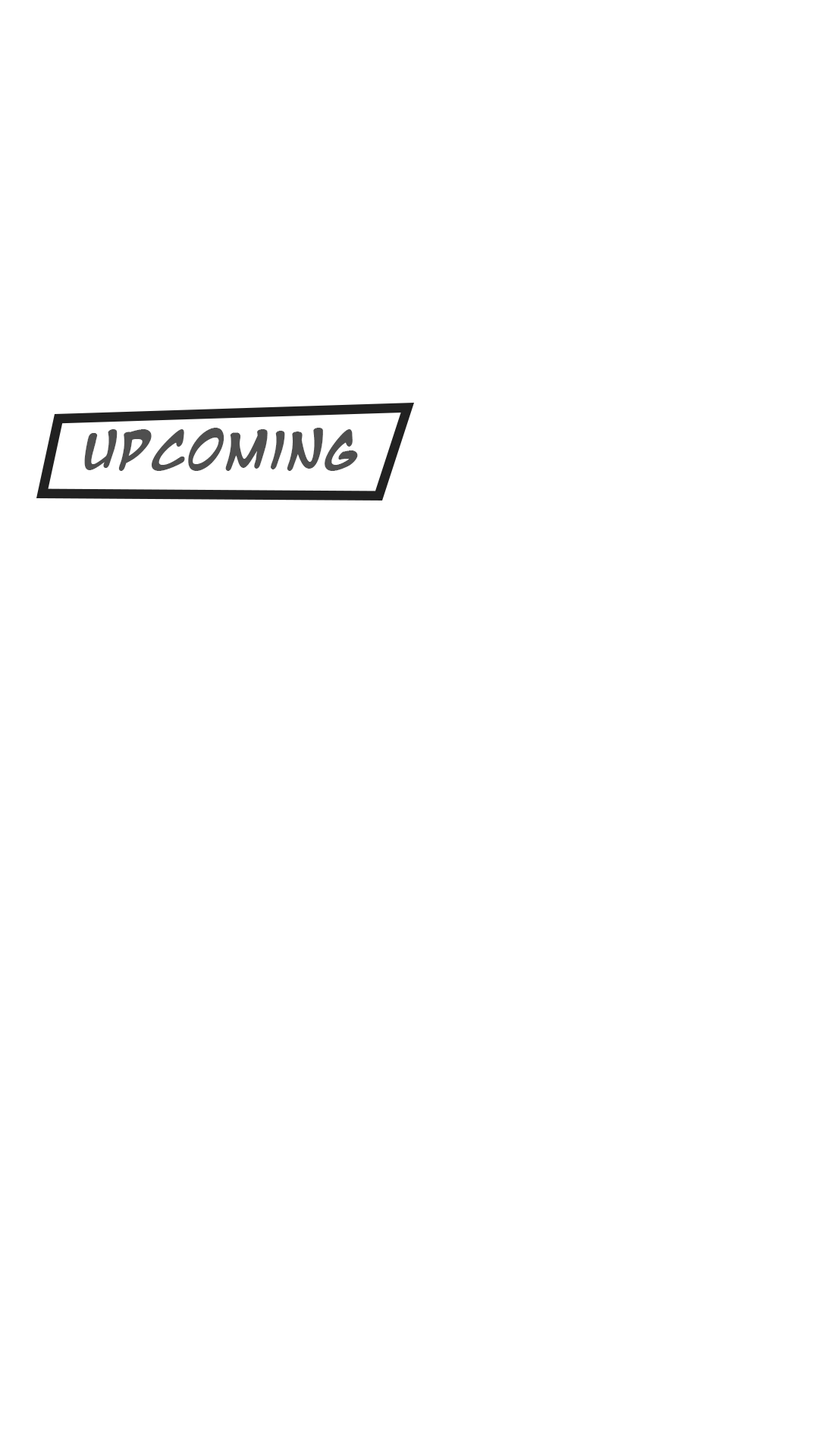
<style>
.page{position:relative;width:819px;height:1456px;background:#ffffff}
.page>*{position:absolute;margin:0}
.t1{font:43.4px "MangaTempleBold";color:#4f4f4f}
</style>
<div class="page">
<p class="t1" style="left:84px;top:428px;width:274px;height:43px">Upcoming</p>
</div>
